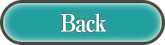
<style>
.page{position:relative;width:165px;height:45px}
.page>*{position:absolute;margin:0}
.t1{font:24px "RyuminPro-ExBold";letter-spacing:-0.08em;color:#ffffff;scale:0.9 1}
</style>
<div class="page">
<p class="t1" style="left:60px;top:13px;width:47px;height:19px">Back</p>
</div>
